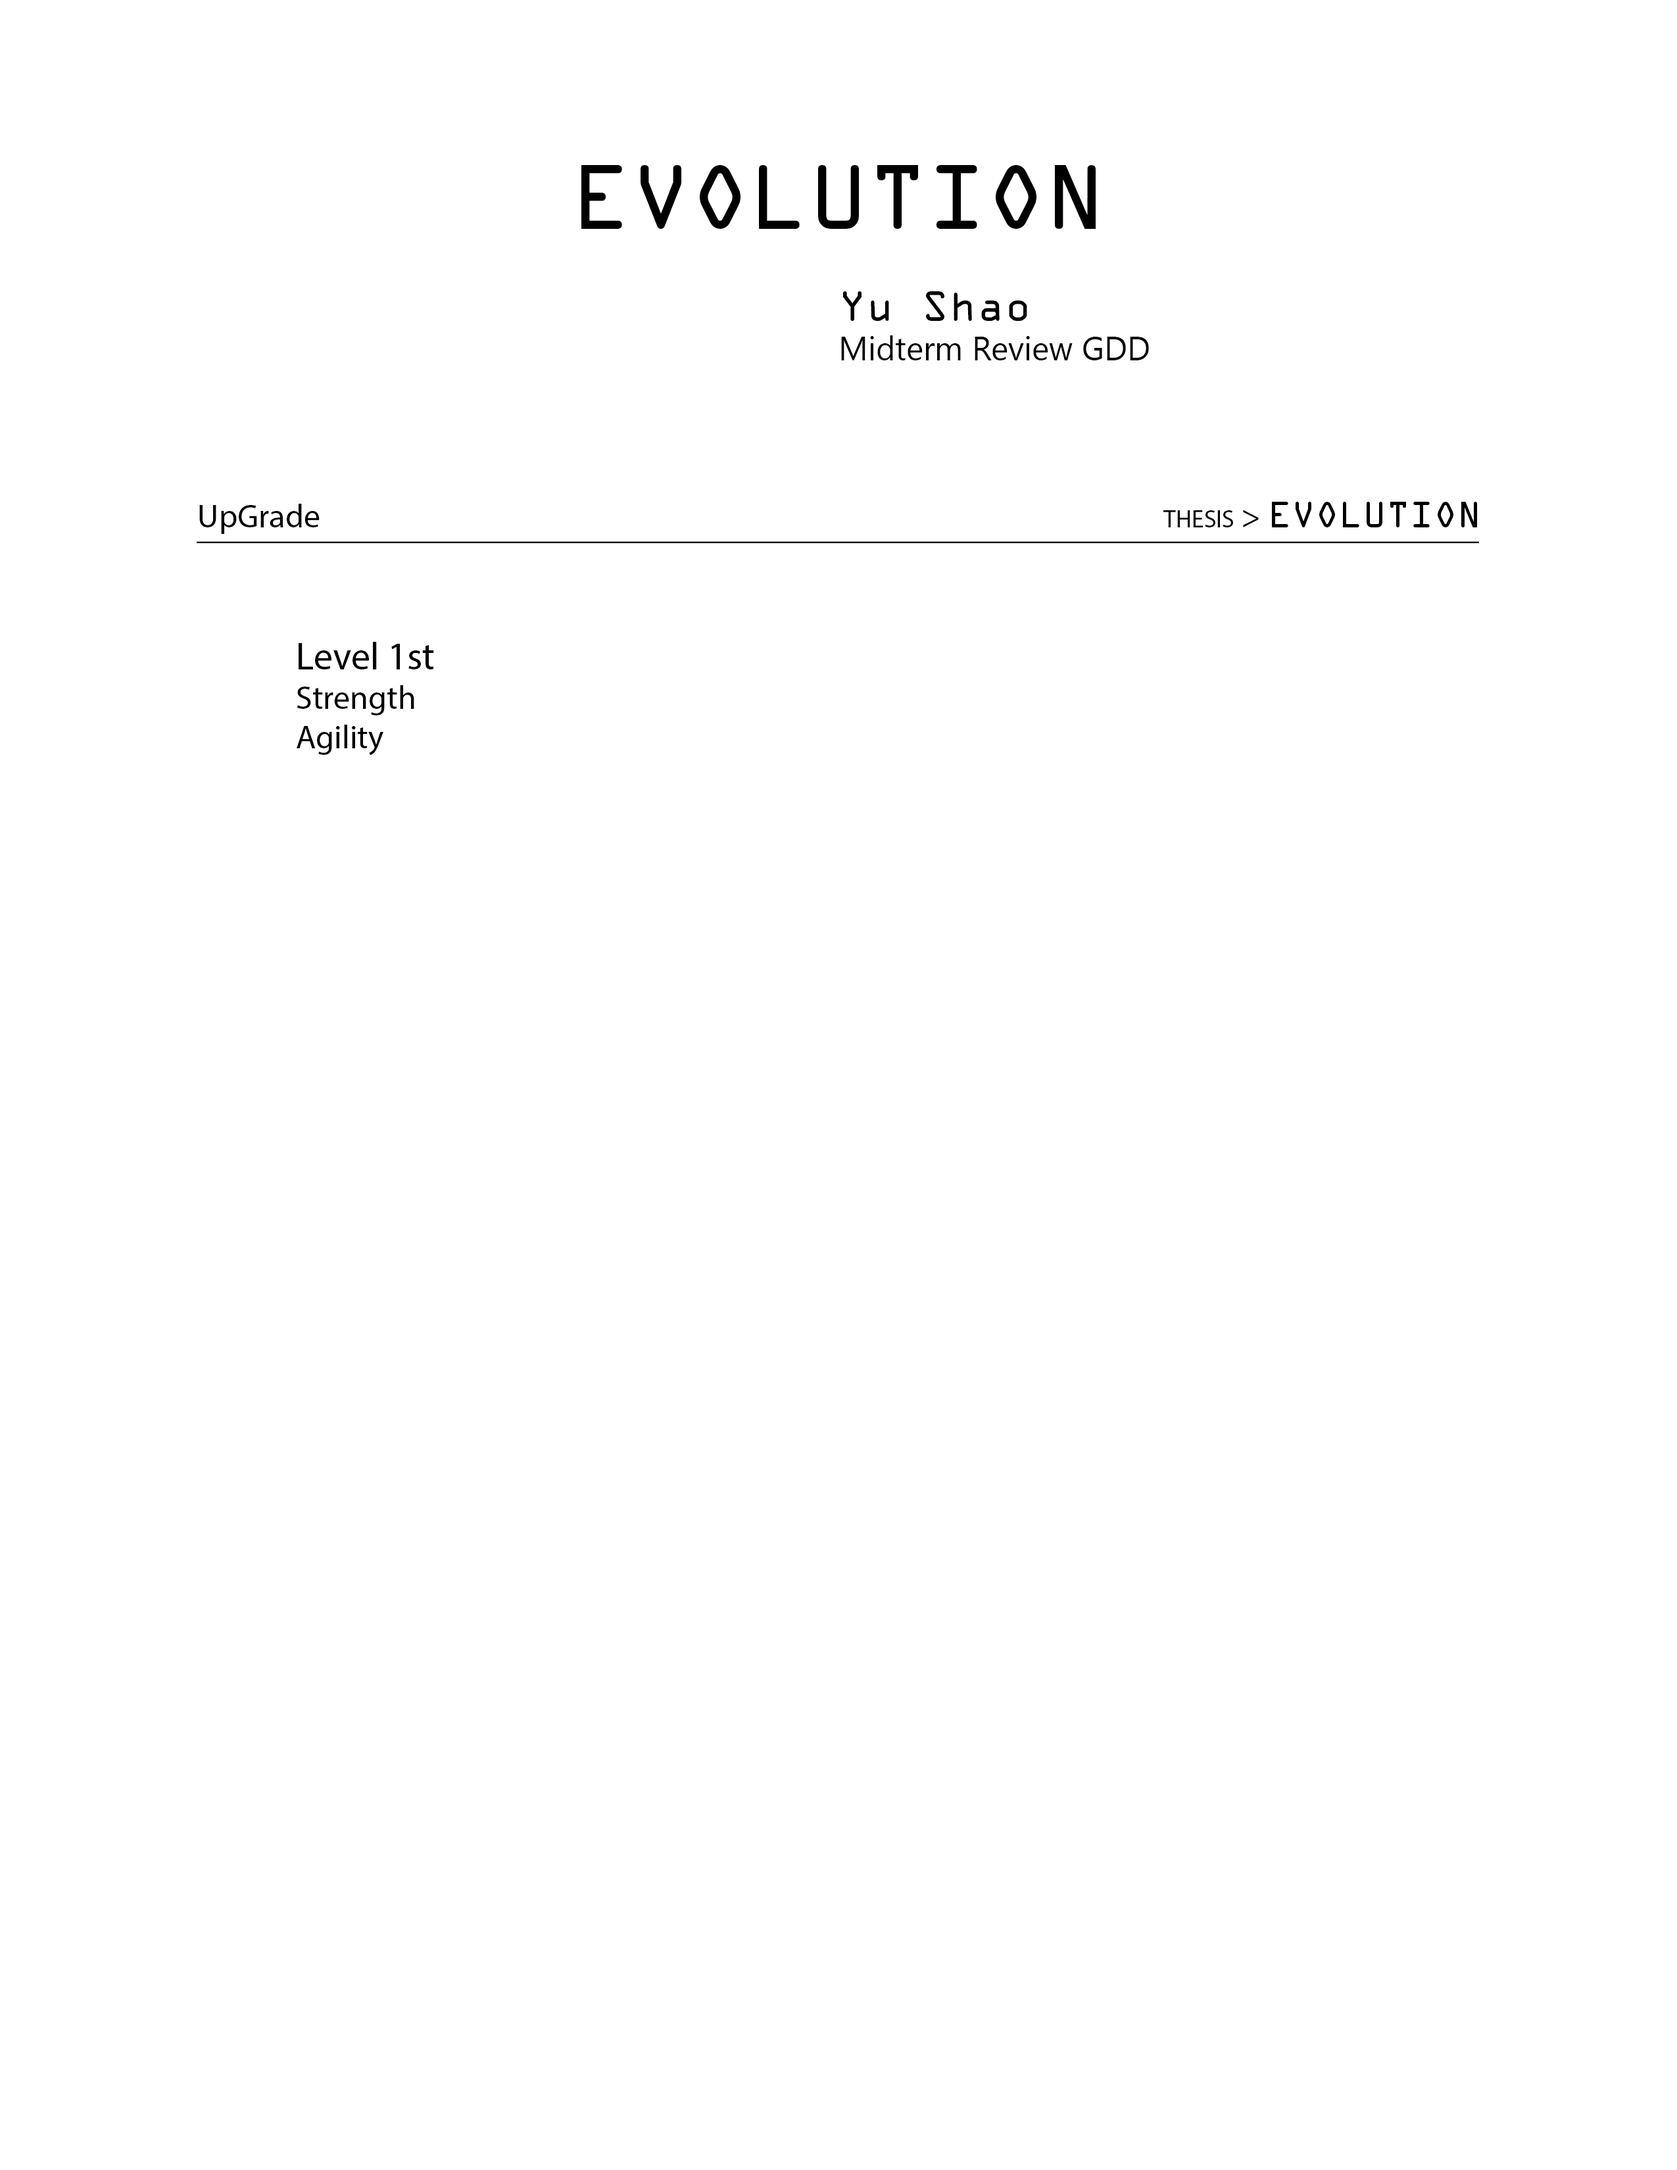
<style>
.page{position:relative;width:1677px;height:2170px;background:#ffffff}
.page>*{position:absolute;margin:0}
.t1{font:7.9px "OCRAStd";color:#000000}
.t2{font:7.9px "MyriadPro-Regular";color:#000000}
.t3{font:24.7px "MyriadPro-Regular";color:#000000}
.t4{font:38.4px "MyriadPro-Regular";color:#000000}
</style>
<div class="page">
<p class="t1" style="left:199px;top:502px;width:1278px;height:32px"><span class="t2">UpGrade                                                                                                                         </span><span class="t3">THESIS</span><span class="t2"> &gt; </span>EVOLUTION</p>
<p class="t2" style="left:197px;top:541px;width:1282px;height:2px">______________________________________________________________________________</p>
<p class="t2" style="left:297px;top:642px;width:137px;height:113px"><span class="t4">Level 1st<br></span>Strength<br>Agility</p>
</div>
